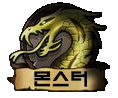
<style>
.page{position:relative;width:118px;height:98px;background:#ffffff}
.page>*{position:absolute;margin:0}
.t1{font:18px "ExpoM-HM";color:#000000;font-weight:bold}
</style>
<div class="page">
<p class="t1" style="left:34px;top:71px;width:53px;height:16px">몬스터</p>
</div>
